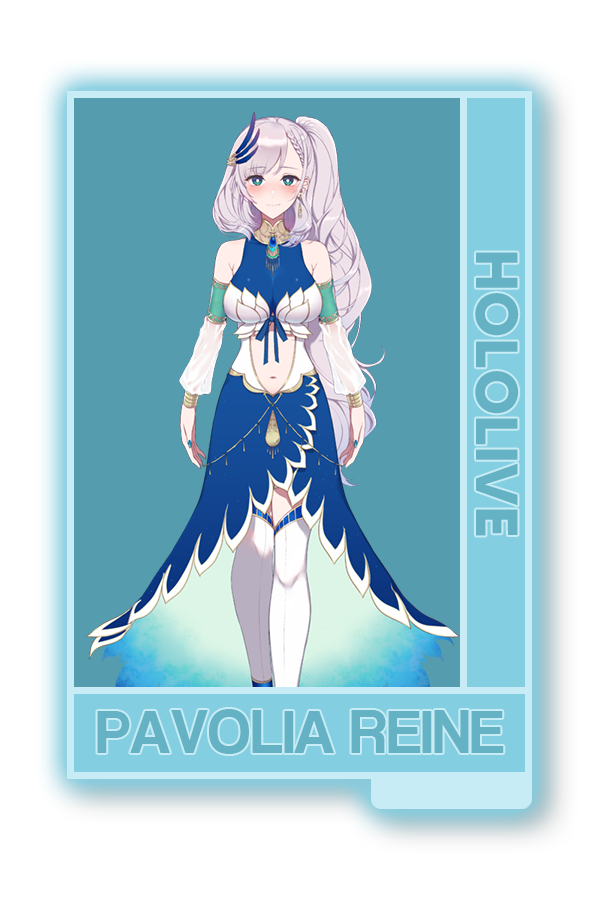
<style>
.page{position:relative;width:600px;height:900px;background:#549cae}
.page>*{position:absolute;margin:0}
.t1{font:59.2px "MADETOMMY-Bold";color:#66b2c5}
.t2{font:63.4px "CoolveticaRg-Regular";color:#66b2c5}
</style>
<div class="page">
<p class="t1" style="left:475px;top:252px;width:44px;height:284px;rotate:90deg">HOLOLIVE</p>
<p class="t2" style="left:97px;top:709px;width:407px;height:45px">PAVOLIA REINE</p>
</div>
